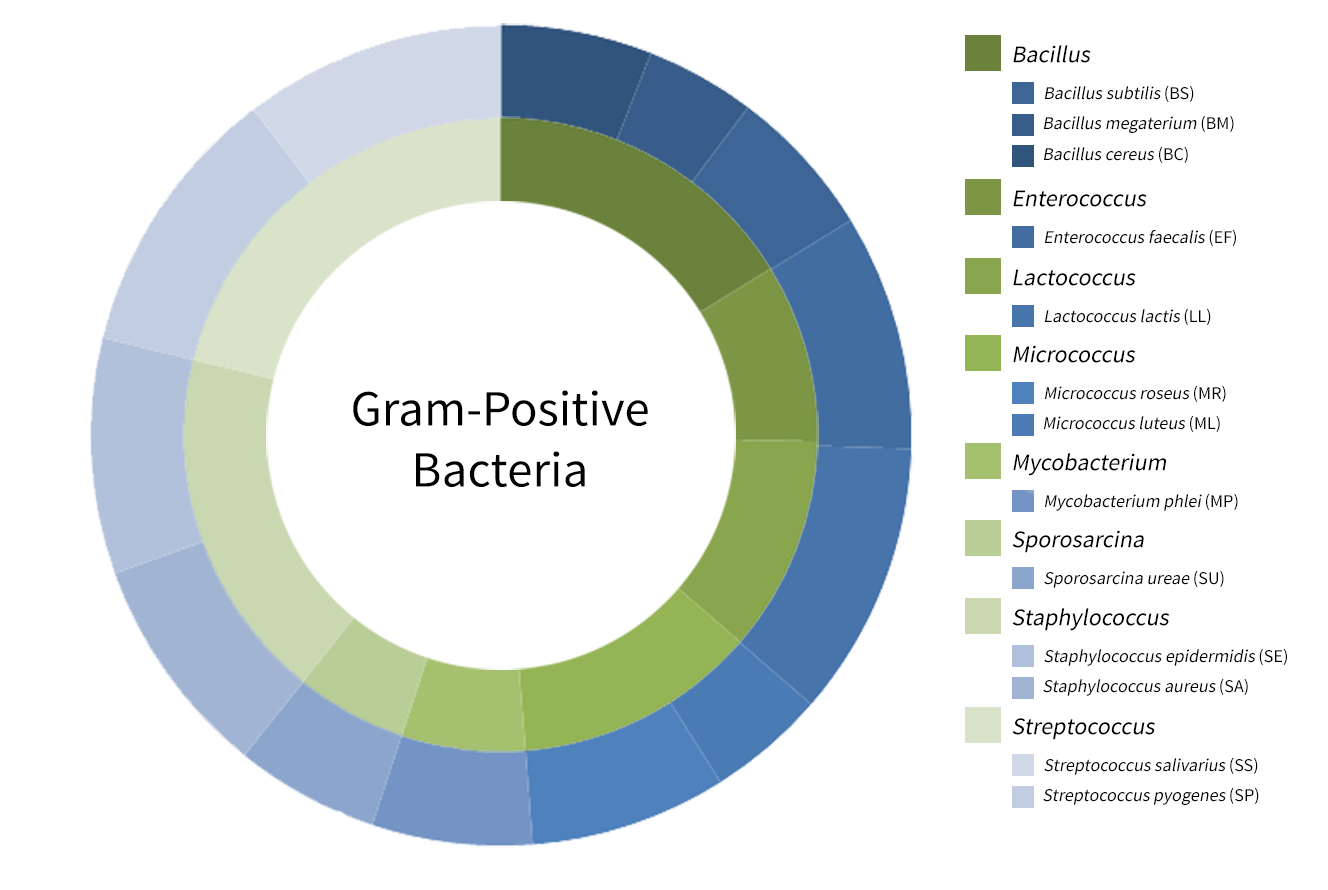
<style>
.page{position:relative;width:1328px;height:890px;background:#ffffff}
.page>*{position:absolute;margin:0}
.t1{font:24px "SourceSansPro-Regular";color:#000000;font-style:italic}
.t2{font:18px "SourceSansPro-Regular";color:#000000;font-style:italic}
.t3{font:18px "AbyssinicaSIL";color:#000000}
.t4{font:50.7px "AbyssinicaSIL";color:#000000}
</style>
<div class="page">
<p class="t1" style="left:1013px;top:45px;width:78px;height:18px">Bacillus</p>
<p class="t2" style="left:1044px;top:85px;width:150px;height:17px">Bacillus subtilis <span class="t3">(BS)</span></p>
<p class="t2" style="left:1043px;top:115px;width:191px;height:18px">Bacillus megaterium<span class="t3"> (BM)</span></p>
<p class="t2" style="left:1043px;top:146px;width:145px;height:17px">Bacillus cereus <span class="t3">(BC)</span></p>
<p class="t1" style="left:1013px;top:190px;width:134px;height:17px">Enterococcus</p>
<p class="t2" style="left:1044px;top:229px;width:192px;height:17px">Enterococcus faecalis <span class="t3">(EF)</span></p>
<p class="t1" style="left:1013px;top:269px;width:123px;height:17px">Lactococcus</p>
<p class="t2" style="left:1044px;top:308px;width:167px;height:17px">Lactococcus lactis <span class="t3">(LL)</span></p>
<p class="t1" style="left:1013px;top:345px;width:123px;height:18px">Micrococcus</p>
<p class="t4" style="left:353px;top:390px;width:295px;height:97px;text-align:center">Gram-Positive<br>Bacteria</p>
<p class="t2" style="left:1044px;top:385px;width:182px;height:17px">Micrococcus roseus <span class="t3">(MR)</span></p>
<p class="t2" style="left:1043px;top:415px;width:177px;height:17px">Micrococcus luteus <span class="t3">(ML)</span></p>
<p class="t1" style="left:1013px;top:453px;width:153px;height:23px">Mycobacterium</p>
<p class="t2" style="left:1044px;top:493px;width:194px;height:18px">Mycobacterium phlei <span class="t3">(MP)</span></p>
<p class="t1" style="left:1012px;top:530px;width:132px;height:23px">Sporosarcina</p>
<p class="t2" style="left:1044px;top:570px;width:180px;height:18px">Sporosarcina ureae <span class="t3">(SU)</span></p>
<p class="t1" style="left:1012px;top:608px;width:158px;height:23px">Staphylococcus</p>
<p class="t2" style="left:1044px;top:648px;width:243px;height:18px">Staphylococcus epidermidis <span class="t3">(SE)</span></p>
<p class="t2" style="left:1043px;top:678px;width:205px;height:18px">Staphylococcus aureus <span class="t3">(SA)</span></p>
<p class="t1" style="left:1012px;top:718px;width:143px;height:22px">Streptococcus</p>
<p class="t2" style="left:1044px;top:757px;width:214px;height:18px">Streptococcus salivarius <span class="t3">(SS)</span></p>
<p class="t2" style="left:1043px;top:787px;width:216px;height:18px">Streptococcus pyogenes <span class="t3">(SP)</span></p>
</div>
